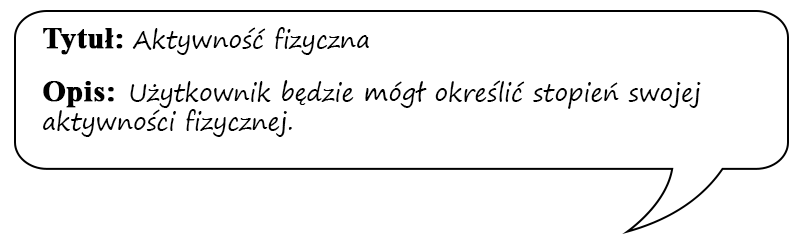
<style>
.page{position:relative;width:800px;height:242px;background:#ffffff}
.page>*{position:absolute;margin:0}
.t1{font:24px "SegoePrint";color:#000000}
.t2{font:30px "TimesNewRomanPS-BoldMT";color:#000000;font-weight:bold}
</style>
<div class="page">
<p class="t1" style="left:43px;top:27px;width:658px;height:110px"><span class="t2">Tytuł: </span>Aktywność fizyczna<br><br><span class="t2">Opis:  </span>Użytkownik będzie mógł określić stopień swojej aktywności fizycznej.</p>
</div>
